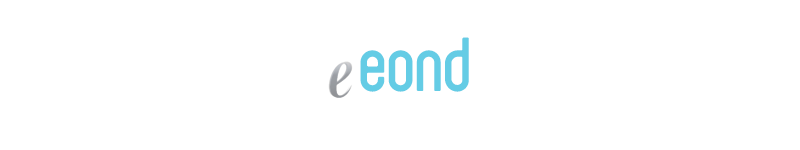
<style>
.page{position:relative;width:800px;height:150px;background:#ffffff}
.page>*{position:absolute;margin:0}
.t1{font:72px "071MKSD-01Medium";letter-spacing:-0.01em;color:#64cce5}
</style>
<div class="page">
<p class="t1" style="left:360px;top:37px;width:109px;height:55px">eond</p>
</div>
